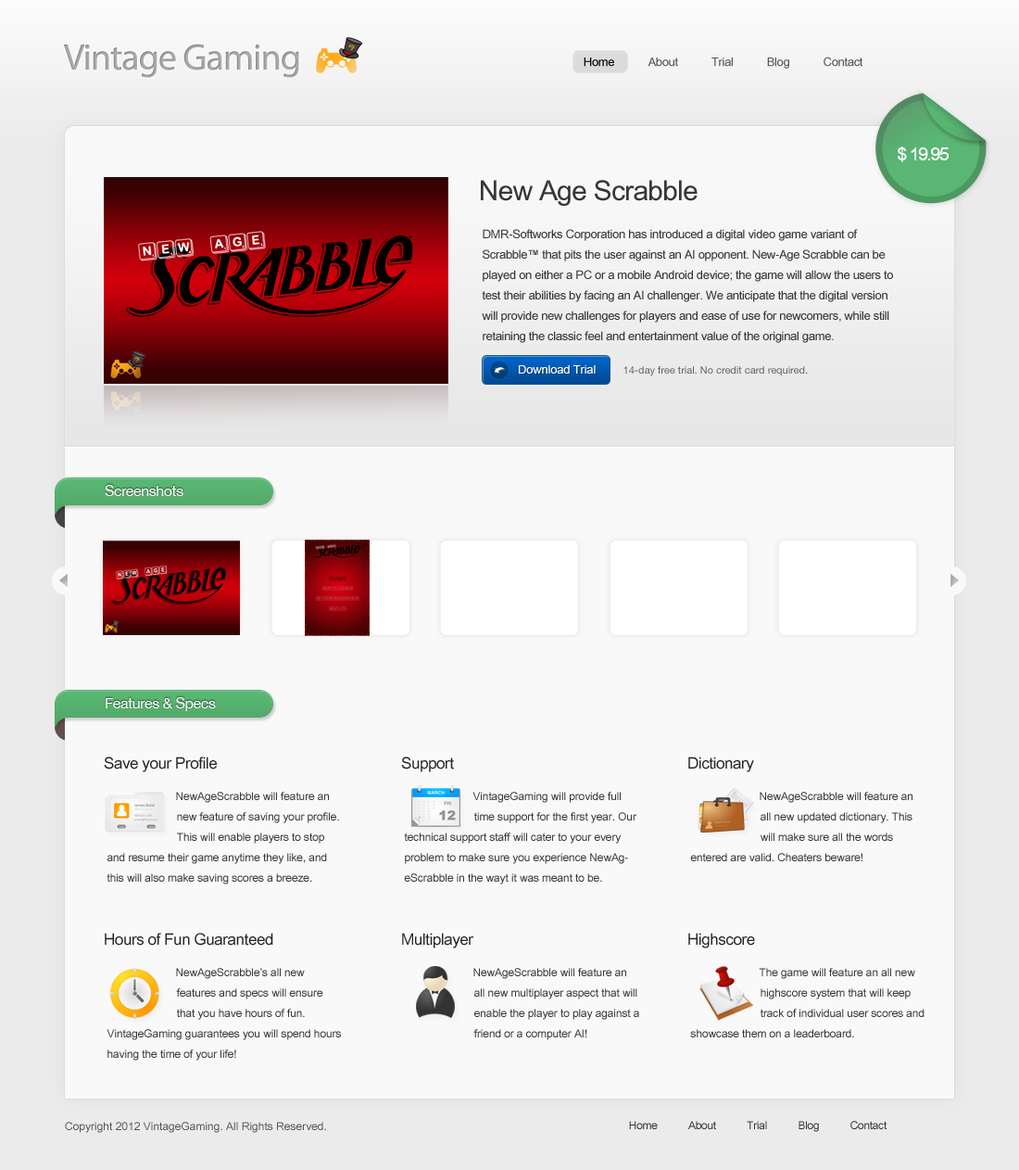
<style>
.page{position:relative;width:1019px;height:1170px;background:#f8f9f8}
.page>*{position:absolute;margin:0}
.t1{font:37.1px "MyriadPro-Regular";letter-spacing:-0.025em;color:#acacac}
.t2{font:12px "ArialUnicodeMS";letter-spacing:-0.025em;color:#555555}
.t3{font:12px "ArialUnicodeMS";letter-spacing:-0.025em;color:#000000}
.t4{font:18.1px "ArialUnicodeMS";letter-spacing:-0.075em;color:#ffffff}
.t5{font:27.8px "ArialUnicodeMS";letter-spacing:-0.025em;color:#363636}
.t6{font:12px/20.4px "ArialUnicodeMS";letter-spacing:-0.025em;color:#363636}
.t7{font:12px "ArialUnicodeMS";letter-spacing:-0.015em;color:#ffffff}
.t8{font:10.2px "HelveticaNeue";color:#636363}
.t9{font:14.8px "HelveticaNeue";letter-spacing:-0.025em;color:#ffffff}
.t10{font:15.8px "ArialUnicodeMS";letter-spacing:-0.025em;color:#252525}
.t11{font:11.1px/20.4px "ArialUnicodeMS";letter-spacing:-0.01em;color:#363636}
.t12{font:11.1px "ArialUnicodeMS";color:#555555}
.t13{font:11.1px "ArialUnicodeMS";letter-spacing:-0.025em;color:#333333}
</style>
<div class="page">
<p class="t1" style="left:64px;top:44px;width:235px;height:34px">Vintage Gaming</p>
<p class="t2" style="left:584px;top:57px;width:280px;height:12px"><span class="t3">Home   </span>        About           Trial           Blog           Contact</p>
<p class="t4" style="left:898px;top:146px;width:52px;height:16px">$ 19.95</p>
<p class="t5" style="left:481px;top:180px;width:217px;height:26px">New Age Scrabble</p>
<p class="t6" style="left:482px;top:229px;width:411px;height:114px">DMR-Softworks Corporation has introduced a digital video game variant of Scrabble™ that pits the user against an AI opponent. New-Age Scrabble can be played on either a PC or a mobile Android device; the game will allow the users to test their abilities by facing an AI challenger. We anticipate that the digital version will provide new challenges for players and ease of use for newcomers, while still retaining the classic feel and entertainment value of the original game.</p>
<p class="t7" style="left:519px;top:365px;width:77px;height:9px">Download Trial</p>
<p class="t8" style="left:624px;top:366px;width:184px;height:10px">14-day free trial. No credit card required.</p>
<p class="t9" style="left:105px;top:485px;width:79px;height:11px">Screenshots</p>
<p class="t9" style="left:106px;top:697px;width:110px;height:14px">Features &amp; Specs</p>
<p class="t10" style="left:104px;top:756px;width:113px;height:16px">Save your Profile</p>
<p class="t10" style="left:401px;top:756px;width:53px;height:16px">Support</p>
<p class="t10" style="left:689px;top:756px;width:65px;height:16px">Dictionary</p>
<p class="t11" style="left:107px;top:791px;width:232px;height:93px">NewAgeScrabble will feature an<br>   new feature of saving your profile.<br>   This will enable players to stop and resume their game anytime they like, and this will also make saving scores a breeze.</p>
<p class="t11" style="left:404px;top:791px;width:234px;height:93px">VintageGaming will provide full      time support for the first year. Our  technical support staff will cater to your every problem to make sure you experience NewAgeScrabble in the wayt it was meant to be.</p>
<p class="t11" style="left:690px;top:791px;width:223px;height:70px">NewAgeScrabble will feature an      all new updated dictionary. This      will make sure all the words entered are valid. Cheaters beware!</p>
<p class="t10" style="left:105px;top:932px;width:168px;height:13px">Hours of Fun Guaranteed</p>
<p class="t10" style="left:402px;top:932px;width:73px;height:16px">Multiplayer</p>
<p class="t10" style="left:689px;top:932px;width:66px;height:16px">Highscore</p>
<p class="t11" style="left:107px;top:968px;width:234px;height:92px">NewAgeScrabble’s all new      features and specs will ensure      that you have hours of fun. VintageGaming guarantees you will spend hours having the time of your life!</p>
<p class="t11" style="left:474px;top:968px;width:165px;height:72px">NewAgeScrabble will feature an      all new multiplayer aspect that will     enable the player to play against a     friend or a computer AI!</p>
<p class="t11" style="left:690px;top:968px;width:235px;height:69px">The game will feature an all new      highscore system that will keep      track of individual user scores and showcase them on a leaderboard.</p>
<p class="t12" style="left:65px;top:1121px;width:261px;height:12px">Copyright 2012 VintageGaming. All Rights Reserved.</p>
<p class="t13" style="left:629px;top:1121px;width:259px;height:11px">Home           About           Trial           Blog           Contact</p>
</div>
